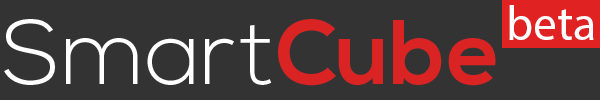
<style>
.page{position:relative;width:600px;height:100px;background:#333333}
.page>*{position:absolute;margin:0}
.t1{font:48px "MyriadPro-Regular";color:#ffffff}
.t2{font:91.3px "NexaLight";color:#ffffff}
.t3{font:91.3px "NexaBold";color:#da2424}
</style>
<div class="page">
<p class="t1" style="left:509px;top:5px;width:85px;height:35px">beta</p>
<p class="t2" style="left:4px;top:19px;width:492px;height:67px">Smart<span class="t3">Cube</span></p>
</div>
